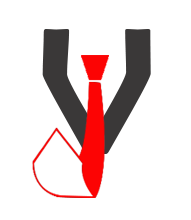
<style>
.page{position:relative;width:191px;height:220px;background:#ffffff}
.page>*{position:absolute;margin:0}
.t1{font:182px "BerlinSansFB-Reg";color:#3a3838;scale:1.06 1}
</style>
<div class="page">
<p class="t1" style="left:42px;top:29px;width:109px;height:125px">V</p>
</div>
